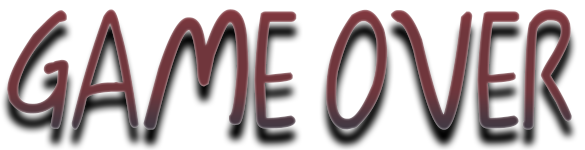
<style>
.page{position:relative;width:585px;height:150px;background:#ffffff}
.page>*{position:absolute;margin:0}
.t1{font:171.2px "KFont";letter-spacing:-0.1em;font-weight:bold;scale:0.91 1}
</style>
<div class="page">
<p class="t1" style="left:7px;top:9px;width:565px;height:121px">GAME OVER</p>
</div>
